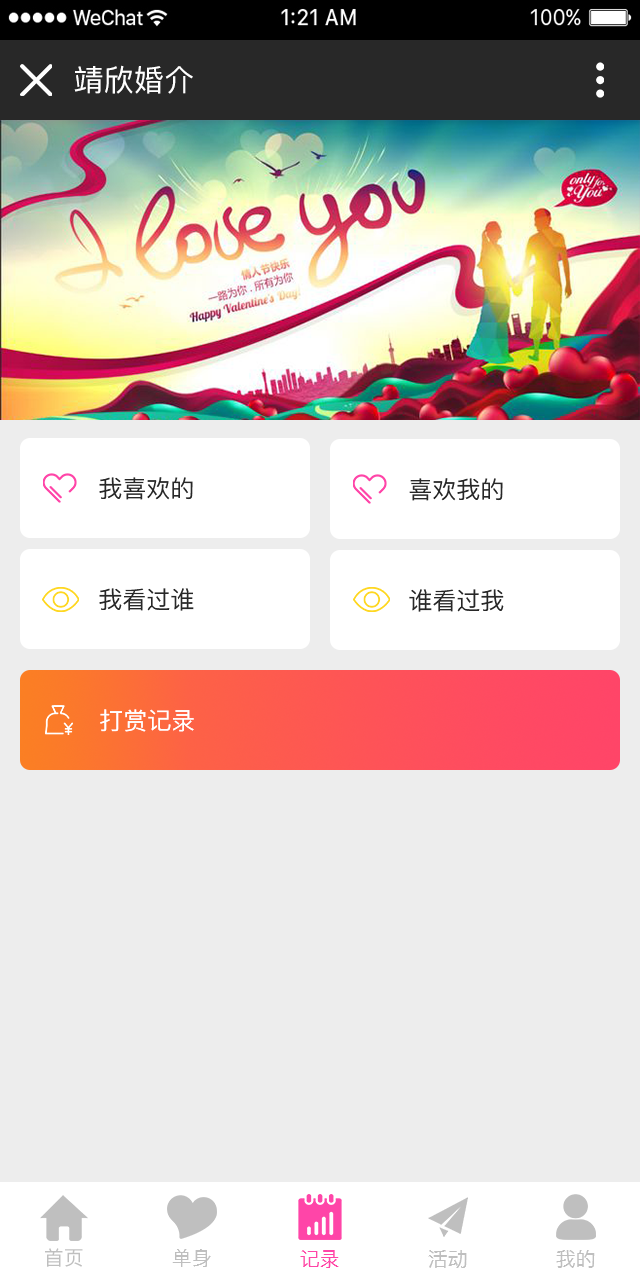
<style>
.page{position:relative;width:640px;height:1280px;background:#ededed}
.page>*{position:absolute;margin:0}
.t1{font:30px "PingFang-SC-Medium";letter-spacing:0.01em;color:#ffffff;text-transform:uppercase}
.t2{font:24px "PingFang-SC-Medium";color:#282828;text-transform:uppercase}
.t3{font:24px "PingFang-SC-Medium";color:#ffffff;text-transform:uppercase}
.t4{font:20px "PingFang-SC-Medium";color:#bfbfbf;text-transform:uppercase}
.t5{font:20px "PingFang-SC-Medium";color:#ff45a8;text-transform:uppercase}
</style>
<div class="page">
<p class="t1" style="left:74px;top:65px;width:119px;height:29px">靖欣婚介</p>
<p class="t2" style="left:99px;top:477px;width:94px;height:23px">我喜欢的</p>
<p class="t2" style="left:409px;top:478px;width:94px;height:23px">喜欢我的</p>
<p class="t2" style="left:99px;top:588px;width:95px;height:23px">我看过谁</p>
<p class="t2" style="left:409px;top:589px;width:95px;height:23px">谁看过我</p>
<p class="t3" style="left:100px;top:709px;width:94px;height:23px">打赏记录</p>
<p class="t4" style="left:45px;top:1248px;width:38px;height:19px">首页</p>
<p class="t4" style="left:172px;top:1249px;width:39px;height:18px">单身</p>
<p class="t5" style="left:300px;top:1250px;width:39px;height:18px">记录</p>
<p class="t4" style="left:428px;top:1250px;width:39px;height:18px">活动</p>
<p class="t4" style="left:556px;top:1250px;width:39px;height:18px">我的</p>
</div>
